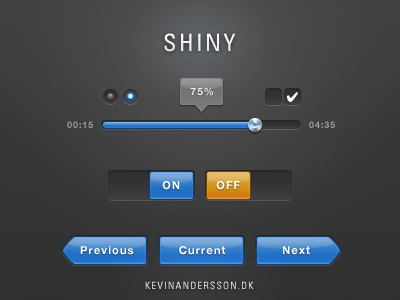
<style>
.page{position:relative;width:400px;height:300px}
.page>*{position:absolute;margin:0}
.t1{font:24px "Univers-Condensed";letter-spacing:0.1em;color:#ffffff;text-transform:uppercase}
.t2{font:10px "HelveticaNeue-Bold";letter-spacing:0.1em;color:#ffffff}
.t3{font:11px "HelveticaNeue-Bold";letter-spacing:0.1em;color:#ffffff}
</style>
<div class="page">
<p class="t1" style="left:164px;top:33px;width:72px;height:19px">shiny</p>
<p class="t2" style="left:190px;top:87px;width:23px;height:9px;opacity:0.85">75%</p>
<p class="t3" style="left:162px;top:181px;width:18px;height:9px">ON</p>
<p class="t3" style="left:216px;top:181px;width:24px;height:9px">OFF</p>
<p class="t3" style="left:80px;top:246px;width:54px;height:9px">Previous</p>
<p class="t3" style="left:179px;top:246px;width:47px;height:9px">Current</p>
<p class="t3" style="left:283px;top:246px;width:27px;height:9px">Next</p>
</div>
